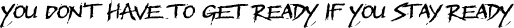
<style>
.page{position:relative;width:514px;height:28px;background:#ffffff}
.page>*{position:absolute;margin:0}
.t1{font:25px "BMXRadical";color:#000000}
</style>
<div class="page">
<p class="t1" style="left:0px;top:0px;width:514px;height:28px">You don’t have to get ready if you stay ready</p>
</div>
